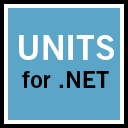
<style>
.page{position:relative;width:128px;height:128px;background:#5aa5c8}
.page>*{position:absolute;margin:0}
.t1{font:23.7px "TradeGothic-BoldTwo";color:#000000}
.t2{font:33.9px "TradeGothic-BoldTwo";color:#ffffff}
</style>
<div class="page">
<p class="t1" style="left:19px;top:35px;width:95px;height:53px;text-align:center"><span class="t2">UNITS<br></span>for .NET</p>
</div>
